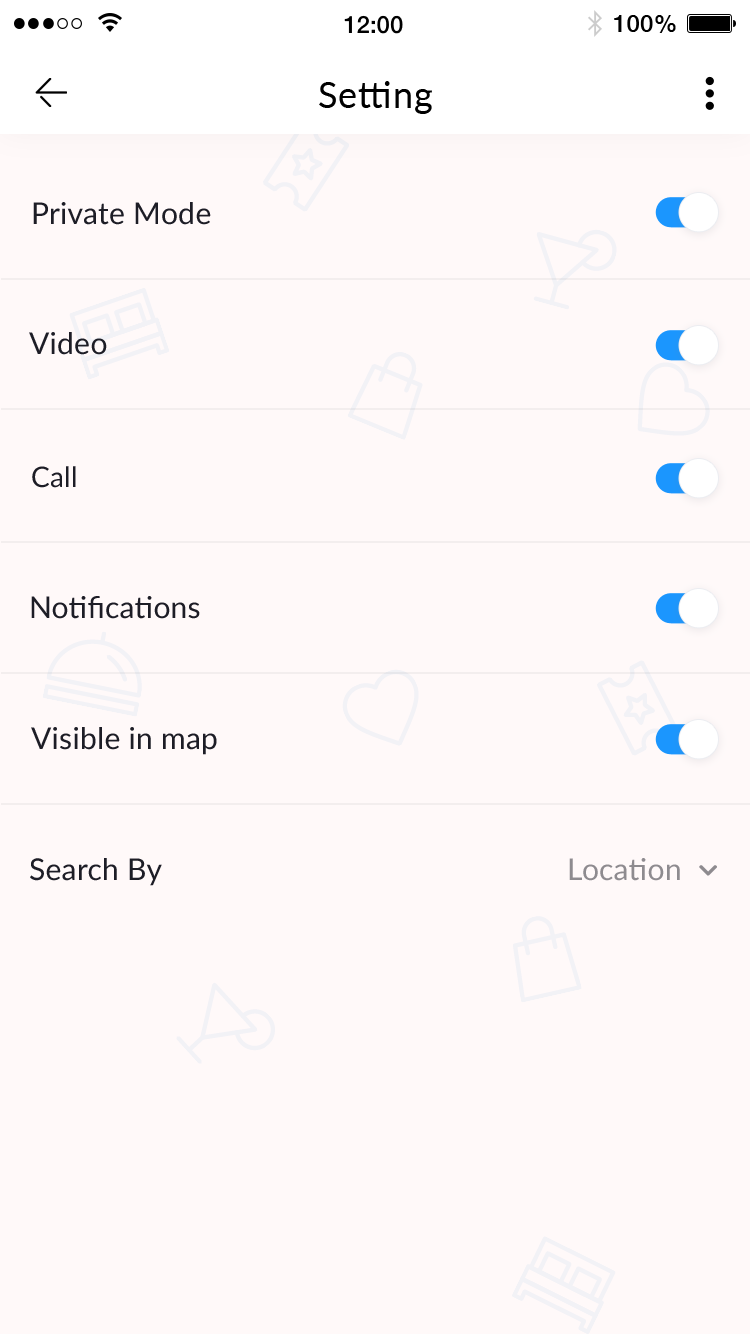
<style>
.page{position:relative;width:750px;height:1334px;background:#fff9f9}
.page>*{position:absolute;margin:0}
.t1{font:36px "Lato-Regular";letter-spacing:0.025em;color:#000000}
.t2{font:30px "Lato-Regular";letter-spacing:0.01em;color:#1d1d26}
.t3{font:28px "Lato-Regular";letter-spacing:0.01em;color:#1d1d26}
</style>
<div class="page">
<p class="t1" style="left:319px;top:81px;width:113px;height:33px">Setting</p>
<p class="t2" style="left:33px;top:202px;width:178px;height:23px">Private Mode</p>
<p class="t2" style="left:29px;top:332px;width:78px;height:23px">Video</p>
<p class="t3" style="left:32px;top:466px;width:44px;height:22px">Call</p>
<p class="t2" style="left:31px;top:596px;width:169px;height:23px">Notifications</p>
<p class="t2" style="left:31px;top:727px;width:186px;height:28px">Visible in map</p>
<p class="t2" style="left:30px;top:858px;width:132px;height:28px">Search By</p>
</div>
